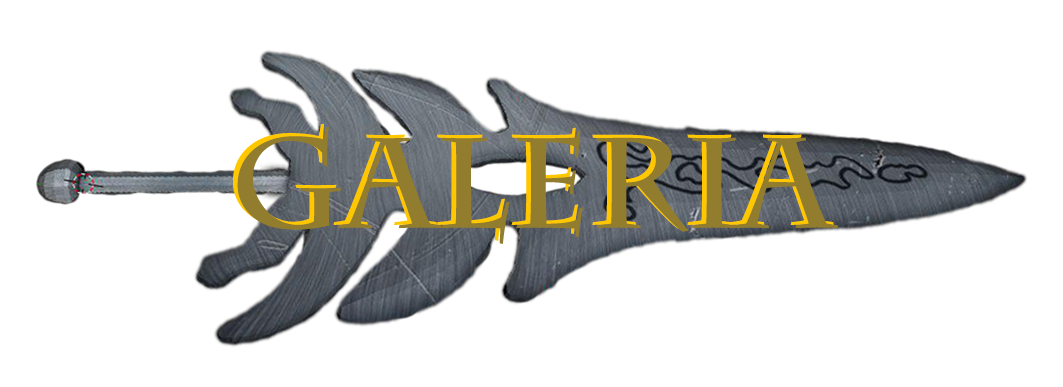
<style>
.page{position:relative;width:1063px;height:387px;background:#ffffff}
.page>*{position:absolute;margin:0}
.t1{font:127.4px "CharlemagneStd-Bold"}
.t2{font:127.4px "CharlemagneStd-Bold";color:#927c2e}
</style>
<div class="page">
<p class="t1" style="left:233px;top:123px;width:601px;height:118px">Galeria</p>
<p class="t2" style="left:237px;top:126px;width:602px;height:118px">Galeria</p>
</div>
